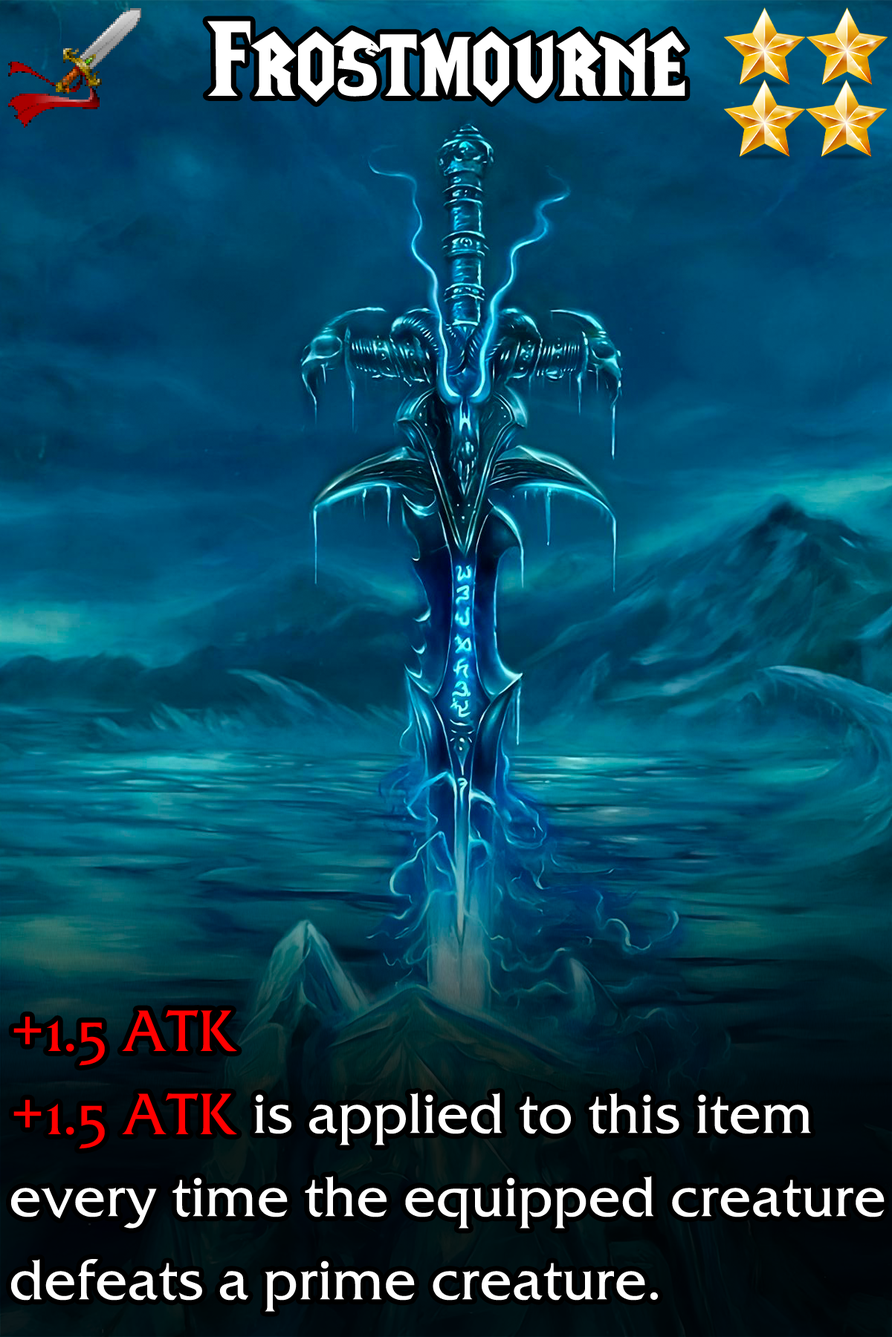
<style>
.page{position:relative;width:892px;height:1337px}
.page>*{position:absolute;margin:0}
.t1{font:182.8px "LifeCraft";color:#ffffff}
.t2{font:95.8px/83.2px "FrizQua-ReguOS";color:#ffffff}
.t3{font:99.6px/83.2px "FrizQua-ReguOS";color:#ff0000}
</style>
<div class="page">
<p class="t1" style="left:207px;top:21px;width:478px;height:81px">Frostmourne</p>
<p class="t2" style="left:11px;top:1010px;width:873px;height:302px"><span class="t3">+1.5 ATK<br>+1.5 ATK </span>is applied to this item every time the equipped creature defeats a prime creature.</p>
</div>
